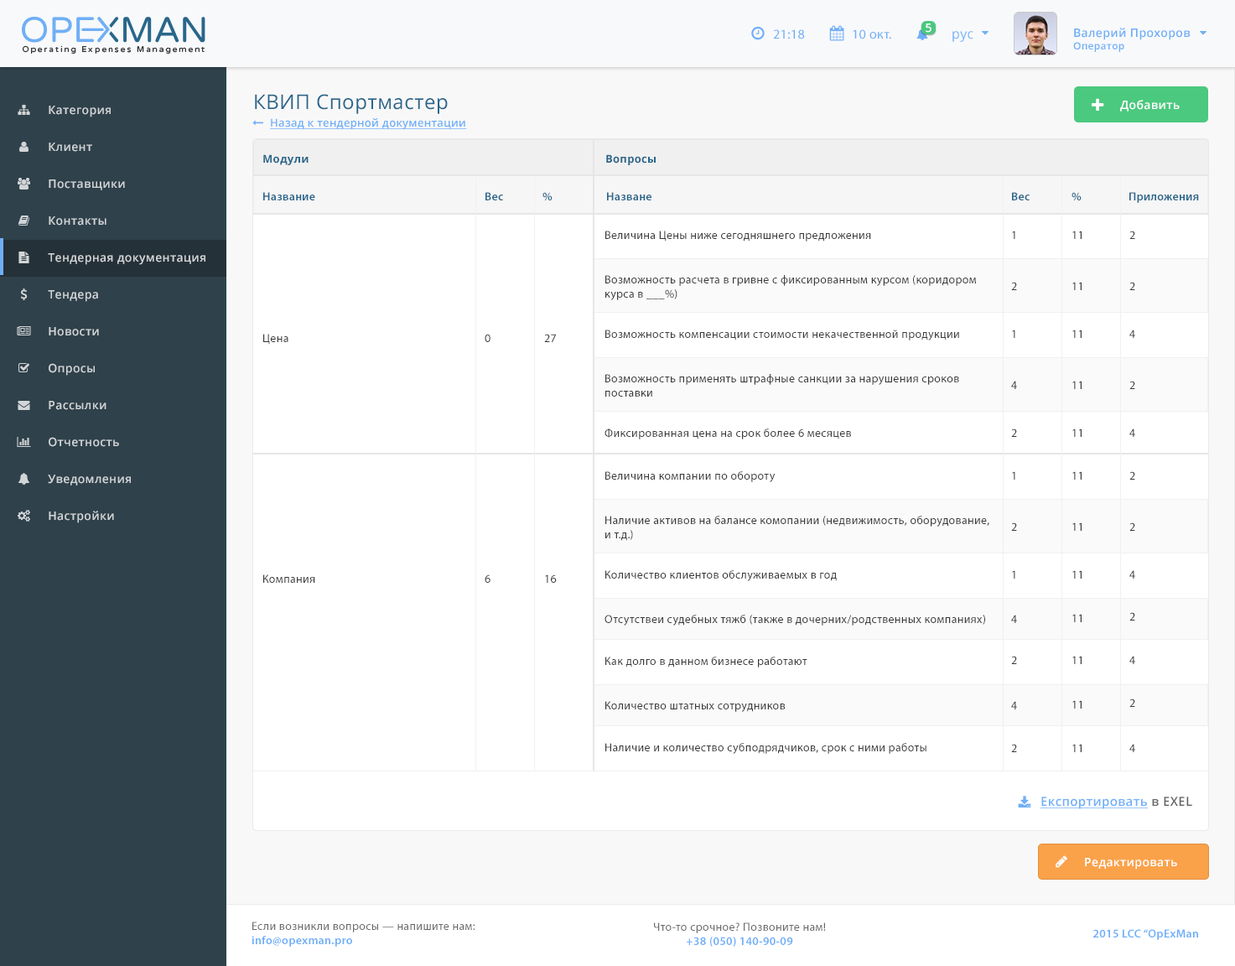
<style>
.page{position:relative;width:1235px;height:966px;background:#ffffff}
.page>*{position:absolute;margin:0}
.t1{font:13.4px "MyriadPro-Regular";letter-spacing:0.025em;color:#6faff8}
.t2{font:11.7px "OpenSans-Semibold";letter-spacing:0.025em;color:#ffffff}
.t3{font:11.7px "OpenSans-Semibold";letter-spacing:0.025em;color:#6eaef7}
.t4{font:10px "OpenSans-Semibold";letter-spacing:0.025em;color:#6eaef7}
.t5{font:13.4px "OpenSans";letter-spacing:0.025em;color:#6eaff8}
.t6{font:20px "OpenSans";letter-spacing:0.025em;color:#29658b}
.t7{font:11.7px "OpenSans-Semibold";letter-spacing:0.025em;color:#d2d5d7}
.t8{font:10.9px "OpenSans-Semibold";letter-spacing:0.025em;color:#6faff8;text-decoration:underline}
.t9{font:10.9px "OpenSans-Bold";letter-spacing:0.025em;color:#29668b}
.t10{font:11.7px "MyriadPro-Semibold";letter-spacing:0.025em;color:#29668b}
.t11{font:11.7px "MyriadPro-Regular";letter-spacing:0.025em;color:#3a3a3a}
.t12{font:12.5px "OpenSans-Semibold";letter-spacing:0.025em;color:#6faff8;text-decoration:underline}
.t13{font:12.5px "OpenSans-Semibold";letter-spacing:0.025em;color:#656565}
.t14{font:11.7px "MyriadPro-Regular";letter-spacing:0.025em;color:#696969}
.t15{font:11.7px "MyriadPro-Semibold";letter-spacing:0.025em;color:#6eaef8}
</style>
<div class="page">
<p class="t1" style="left:773px;top:29px;width:32px;height:10px">21:18</p>
<p class="t1" style="left:853px;top:29px;width:38px;height:10px">10 окт.</p>
<p class="t2" style="left:925px;top:23px;width:6px;height:10px">5</p>
<p class="t3" style="left:1073px;top:28px;width:117px;height:24px">Валерий Прохоров<br><span class="t4">Оператор</span></p>
<p class="t5" style="left:952px;top:31px;width:21px;height:11px">рус</p>
<p class="t6" style="left:255px;top:94px;width:193px;height:20px">КВИП Спортмастер</p>
<p class="t2" style="left:1120px;top:100px;width:59px;height:11px">Добавить</p>
<p class="t7" style="left:49px;top:106px;width:62px;height:11px">Категория</p>
<p class="t8" style="left:270px;top:118px;width:197px;height:11px">Назад к тендерной документации</p>
<p class="t7" style="left:49px;top:143px;width:43px;height:9px">Клиент</p>
<p class="t9" style="left:263px;top:154px;width:45px;height:11px">Модули</p>
<p class="t9" style="left:606px;top:154px;width:50px;height:11px">Вопросы</p>
<p class="t7" style="left:49px;top:179px;width:76px;height:11px">Поставщики</p>
<p class="t10" style="left:263px;top:192px;width:52px;height:8px">Название</p>
<p class="t10" style="left:485px;top:192px;width:18px;height:8px">Вес</p>
<p class="t10" style="left:542px;top:192px;width:10px;height:8px">%</p>
<p class="t10" style="left:607px;top:192px;width:44px;height:8px">Назване</p>
<p class="t10" style="left:1012px;top:192px;width:17px;height:8px">Вес</p>
<p class="t10" style="left:1071px;top:192px;width:10px;height:8px">%</p>
<p class="t10" style="left:1129px;top:192px;width:70px;height:11px">Приложения</p>
<p class="t7" style="left:49px;top:216px;width:57px;height:9px">Контакты</p>
<p class="t11" style="left:605px;top:231px;width:266px;height:10px">Величина Цены ниже сегодняшнего предложения</p>
<p class="t11" style="left:1012px;top:231px;width:3px;height:8px">1</p>
<p class="t11" style="left:1072px;top:231px;width:9px;height:8px">11</p>
<p class="t11" style="left:1129px;top:231px;width:6px;height:8px">2</p>
<p class="t7" style="left:48px;top:253px;width:157px;height:12px">Тендерная документация</p>
<p class="t11" style="left:605px;top:275px;width:371px;height:25px">Возможность расчета в гривне с фиксированным курсом (коридором <br>курса в ___%)</p>
<p class="t11" style="left:1011px;top:282px;width:6px;height:8px">2</p>
<p class="t11" style="left:1072px;top:282px;width:9px;height:8px">11</p>
<p class="t11" style="left:1129px;top:282px;width:6px;height:8px">2</p>
<p class="t7" style="left:48px;top:290px;width:50px;height:12px">Тендера</p>
<p class="t7" style="left:49px;top:327px;width:50px;height:9px">Новости</p>
<p class="t11" style="left:605px;top:329px;width:354px;height:11px">Возможность компенсации стоимости некачественной продукции</p>
<p class="t11" style="left:1012px;top:329px;width:3px;height:9px">1</p>
<p class="t11" style="left:1072px;top:329px;width:9px;height:9px">11</p>
<p class="t11" style="left:1129px;top:329px;width:6px;height:9px">4</p>
<p class="t11" style="left:263px;top:334px;width:25px;height:11px">Цена</p>
<p class="t11" style="left:485px;top:334px;width:5px;height:8px">0</p>
<p class="t11" style="left:544px;top:334px;width:12px;height:8px">27</p>
<p class="t7" style="left:49px;top:363px;width:46px;height:13px">Опросы</p>
<p class="t11" style="left:605px;top:374px;width:354px;height:23px">Возможность применять штрафные санкции за нарушения сроков <br>поставки</p>
<p class="t11" style="left:1011px;top:381px;width:6px;height:8px">4</p>
<p class="t11" style="left:1072px;top:381px;width:9px;height:8px">11</p>
<p class="t11" style="left:1129px;top:381px;width:6px;height:8px">2</p>
<p class="t7" style="left:49px;top:401px;width:57px;height:9px">Рассылки</p>
<p class="t7" style="left:49px;top:437px;width:70px;height:10px">Отчетность</p>
<p class="t11" style="left:604px;top:428px;width:247px;height:11px">Фиксированная цена на срок более 6 месяцев</p>
<p class="t11" style="left:1011px;top:428px;width:6px;height:9px">2</p>
<p class="t11" style="left:1072px;top:428px;width:9px;height:9px">11</p>
<p class="t11" style="left:1129px;top:428px;width:6px;height:9px">4</p>
<p class="t11" style="left:605px;top:471px;width:170px;height:11px">Величина компании по обороту</p>
<p class="t11" style="left:1012px;top:471px;width:3px;height:8px">1</p>
<p class="t11" style="left:1072px;top:471px;width:9px;height:8px">11</p>
<p class="t11" style="left:1129px;top:471px;width:6px;height:8px">2</p>
<p class="t7" style="left:48px;top:474px;width:83px;height:11px">Уведомления</p>
<p class="t7" style="left:49px;top:511px;width:65px;height:12px">Настройки</p>
<p class="t11" style="left:605px;top:516px;width:384px;height:25px">Наличие активов на балансе комопании (недвижимость, оборудование, <br>и т.д.)</p>
<p class="t11" style="left:1011px;top:522px;width:6px;height:9px">2</p>
<p class="t11" style="left:1072px;top:522px;width:9px;height:9px">11</p>
<p class="t11" style="left:1129px;top:522px;width:6px;height:9px">2</p>
<p class="t11" style="left:263px;top:574px;width:52px;height:9px">Компания</p>
<p class="t11" style="left:485px;top:574px;width:5px;height:9px">6</p>
<p class="t11" style="left:545px;top:574px;width:12px;height:9px">16</p>
<p class="t11" style="left:605px;top:570px;width:232px;height:11px">Количество клиентов обслуживаемых в год</p>
<p class="t11" style="left:1012px;top:570px;width:3px;height:8px">1</p>
<p class="t11" style="left:1072px;top:570px;width:9px;height:8px">11</p>
<p class="t11" style="left:1129px;top:570px;width:6px;height:8px">4</p>
<p class="t11" style="left:604px;top:614px;width:381px;height:11px">Отсутствеи судебных тяжб (также в дочерних/родственных компаниях)</p>
<p class="t11" style="left:1011px;top:614px;width:6px;height:9px">4</p>
<p class="t11" style="left:1072px;top:614px;width:9px;height:8px">11</p>
<p class="t11" style="left:1129px;top:612px;width:6px;height:8px">2</p>
<p class="t11" style="left:605px;top:656px;width:202px;height:11px">Как долго в данном бизнесе работают</p>
<p class="t11" style="left:1011px;top:656px;width:6px;height:8px">2</p>
<p class="t11" style="left:1072px;top:656px;width:9px;height:8px">11</p>
<p class="t11" style="left:1129px;top:656px;width:6px;height:8px">4</p>
<p class="t11" style="left:605px;top:701px;width:180px;height:11px">Количество штатных сотрудников</p>
<p class="t11" style="left:1011px;top:701px;width:6px;height:8px">4</p>
<p class="t11" style="left:1072px;top:700px;width:9px;height:8px">11</p>
<p class="t11" style="left:1129px;top:698px;width:6px;height:9px">2</p>
<p class="t11" style="left:605px;top:743px;width:321px;height:11px">Наличие и количество субподрядчиков, срок с ними работы</p>
<p class="t11" style="left:1011px;top:744px;width:6px;height:8px">2</p>
<p class="t11" style="left:1072px;top:744px;width:9px;height:8px">11</p>
<p class="t11" style="left:1129px;top:744px;width:6px;height:8px">4</p>
<p class="t12" style="left:1040px;top:796px;width:152px;height:13px">Експортировать<span class="t13"> в EXEL</span></p>
<p class="t2" style="left:1085px;top:858px;width:92px;height:11px">Редактировать</p>
<p class="t14" style="left:251px;top:921px;width:224px;height:25px">Если возникли вопросы — напишите нам:<br><span class="t15">info@opexman.pro</span></p>
<p class="t14" style="left:654px;top:922px;width:172px;height:24px;text-align:center">Что-то срочное? Позвоните нам!<br><span class="t15">+38 (050) 140-90-09</span></p>
<p class="t15" style="left:1093px;top:929px;width:105px;height:11px">2015 LCC “OpExMan</p>
</div>
